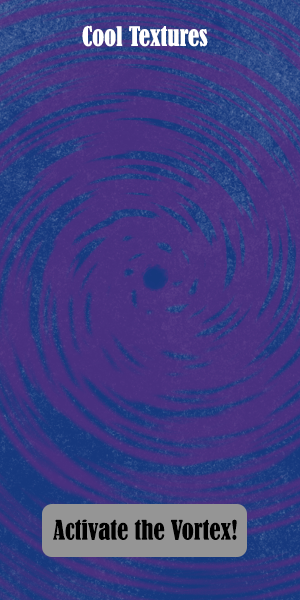
<style>
.page{position:relative;width:300px;height:600px}
.page>*{position:absolute;margin:0}
.t1{font:25px "BernardMT-Condensed";color:#ffffff}
.t2{font:25px "BernardMT-Condensed";color:#000000}
</style>
<div class="page">
<p class="t1" style="left:82px;top:25px;width:126px;height:22px">Cool Textures</p>
<p class="t2" style="left:53px;top:519px;width:184px;height:21px">Activate the Vortex!</p>
</div>
